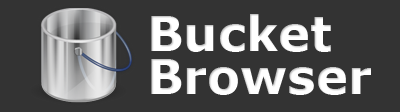
<style>
.page{position:relative;width:400px;height:112px;background:#333333}
.page>*{position:absolute;margin:0}
.t1{font:48px/43px "Verdana-Bold";color:#ffffff}
</style>
<div class="page">
<p class="t1" style="left:151px;top:14px;width:220px;height:81px">Bucket<br>Browser</p>
</div>
